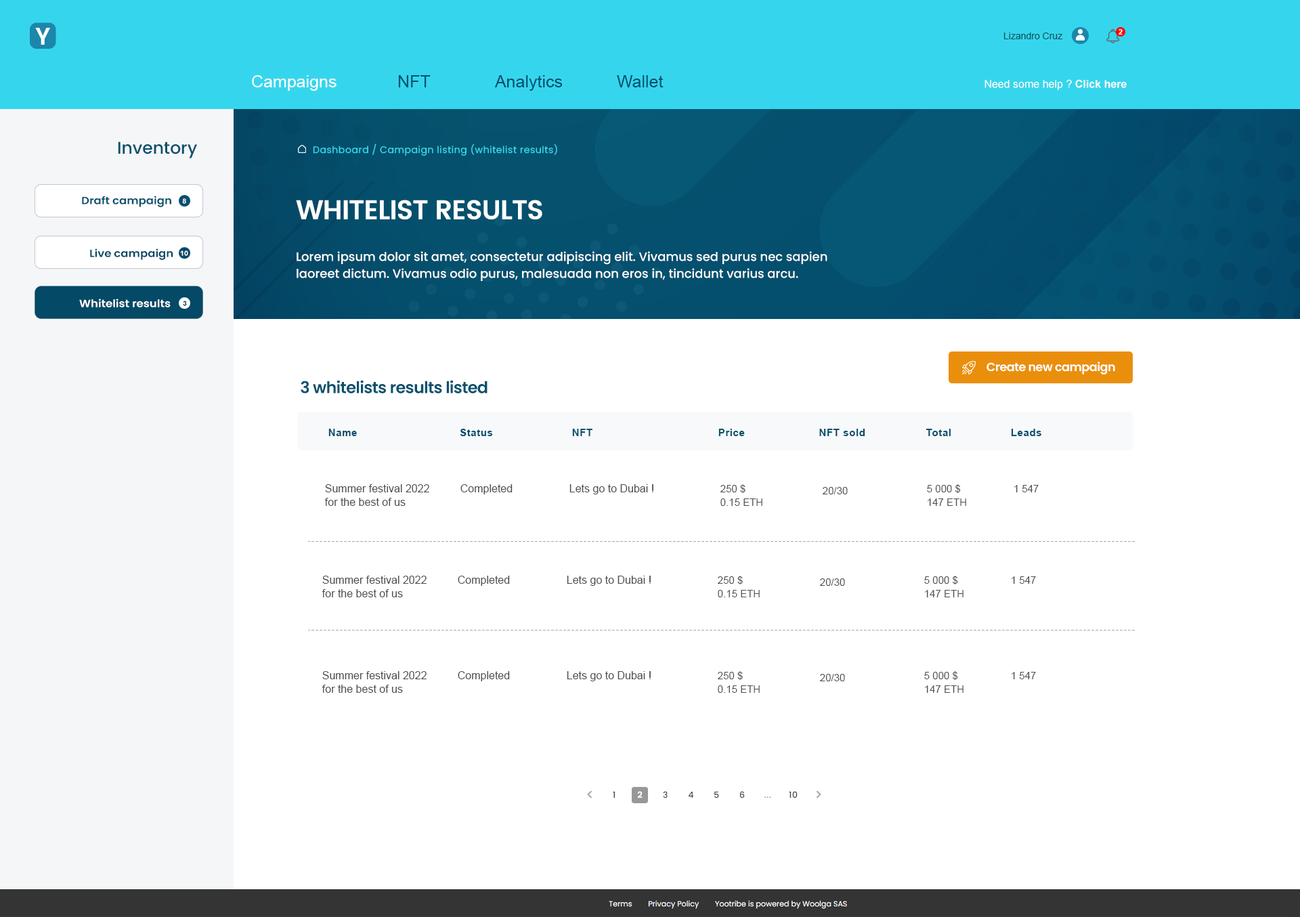
<style>
.page{position:relative;width:1300px;height:917px;background:#ffffff}
.page>*{position:absolute;margin:0}
.t1{font:23.7px "Poppins-SemiBold";color:#ffffff}
.t2{font:7.4px "Arial-BoldMT";color:#ffffff}
.t3{font:9.5px "ArialMT";color:#105761}
.t4{font:16.9px "ArialMT";color:#044d6e}
.t5{font:16.9px "ArialMT";color:#ffffff}
.t6{font:16.9px "ArialMT";color:#05506d}
.t7{font:10.8px "ArialMT";color:#ffffff}
.t8{font:10.8px "Arial-BoldMT";color:#ffffff}
.t9{font:16.9px "Poppins-Medium";color:#05506d}
.t10{font:9.5px "Poppins-Regular";letter-spacing:0.04em;color:#38d8ec}
.t11{font:10.5px "Poppins-SemiBold";color:#05506d;scale:1.07 1}
.t12{font:6.8px "Arial-BoldMT";color:#ffffff;scale:1.07 1}
.t13{font:6.8px "Poppins-SemiBold";color:#ffffff;scale:1.07 1}
.t14{font:27.1px "Poppins-SemiBold";letter-spacing:-0.03em;color:#ffffff}
.t15{font:10.5px "Poppins-SemiBold";color:#044966;scale:1.07 1}
.t16{font:12.2px/16.9px "Poppins-Medium";color:#ffffff}
.t17{font:10.5px "Poppins-SemiBold";color:#ffffff;scale:1.07 1}
.t18{font:6.8px "Arial-BoldMT";color:#044966;scale:1.07 1}
.t19{font:11.9px "Poppins-SemiBold";letter-spacing:-0.03em;color:#ffffff}
.t20{font:16.3px "Poppins-SemiBold";letter-spacing:-0.03em;color:#05516d}
.t21{font:10.2px "Arial-BoldMT";letter-spacing:0.04em;color:#05506d}
.t22{font:10.8px/13.5px "ArialMT";color:#4e4e4e}
.t23{font:10.8px "ArialMT";color:#4e4e4e}
.t24{font:10.2px/13.5px "ArialMT";color:#4e4e4e}
.t25{font:10.2px "ArialMT";color:#4e4e4e}
</style>
<div class="page">
<p class="t1" style="left:35px;top:28px;width:15px;height:17px">Y</p>
<p class="t2" style="left:1119px;top:29px;width:4px;height:6px">2</p>
<p class="t3" style="left:1004px;top:33px;width:59px;height:6px">Lizandro Cruz</p>
<p class="t4" style="left:252px;top:75px;width:412px;height:16px"><span class="t5">Campaigns   </span><span class="t6">NFT</span>   Analytics   Wallet</p>
<p class="t7" style="left:985px;top:79px;width:142px;height:11px">Need some help ? <span class="t8">Click here</span></p>
<p class="t9" style="left:118px;top:142px;width:79px;height:16px">Inventory</p>
<p class="t10" style="left:313px;top:144px;width:244px;height:12px">Dashboard / Campaign listing (whitelist results)</p>
<p class="t11" style="left:82px;top:196px;width:89px;height:11px">Draft campaign</p>
<p class="t12" style="left:182px;top:198px;width:4px;height:6px"><span class="t13"> </span>8</p>
<p class="t14" style="left:296px;top:200px;width:246px;height:19px">WHITELIST RESULTS</p>
<p class="t15" style="left:90px;top:249px;width:83px;height:11px">Live campaign</p>
<p class="t12" style="left:180px;top:251px;width:8px;height:5px">10</p>
<p class="t16" style="left:297px;top:251px;width:531px;height:30px">Lorem ipsum dolor sit amet, consectetur adipiscing elit. Vivamus sed purus nec sapien laoreet dictum. Vivamus odio purus, malesuada non eros in, tincidunt varius arcu.</p>
<p class="t17" style="left:79px;top:299px;width:92px;height:8px">Whitelist results</p>
<p class="t18" style="left:183px;top:301px;width:4px;height:5px">3</p>
<p class="t19" style="left:987px;top:362px;width:128px;height:13px">Create new campaign</p>
<p class="t20" style="left:301px;top:380px;width:187px;height:13px">3 whitelists results listed</p>
<p class="t21" style="left:328px;top:429px;width:714px;height:7px">Name       Status    NFT          Price        NFT sold      Total        Leads</p>
<p class="t22" style="left:324px;top:484px;width:105px;height:22px">Summer festival 2022<br>for the best of us</p>
<p class="t23" style="left:461px;top:484px;width:52px;height:10px">Completed</p>
<p class="t23" style="left:570px;top:484px;width:84px;height:10px">Lets go to Dubai !</p>
<p class="t24" style="left:721px;top:484px;width:42px;height:22px">250 $<br>0.15 ETH</p>
<p class="t24" style="left:927px;top:484px;width:39px;height:22px">5 000 $<br>147 ETH</p>
<p class="t25" style="left:1015px;top:485px;width:24px;height:7px">1 547</p>
<p class="t25" style="left:823px;top:487px;width:25px;height:7px">20/30</p>
</div>
